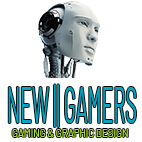
<style>
.page{position:relative;width:142px;height:142px;background:#ffffff}
.page>*{position:absolute;margin:0}
.t1{font:50px "Barlow-Regular";color:#00a8c6;scale:0.39 1}
.t2{font:11.3px "Barlow-Regular";color:#aee239;scale:0.85 1}
</style>
<div class="page">
<p class="t1" style="left:8px;top:84px;width:128px;height:43px">NEW || GAMERS</p>
<p class="t2" style="left:12px;top:129px;width:116px;height:8px">GAMING &amp; GRAPHIC DESIGN</p>
</div>
